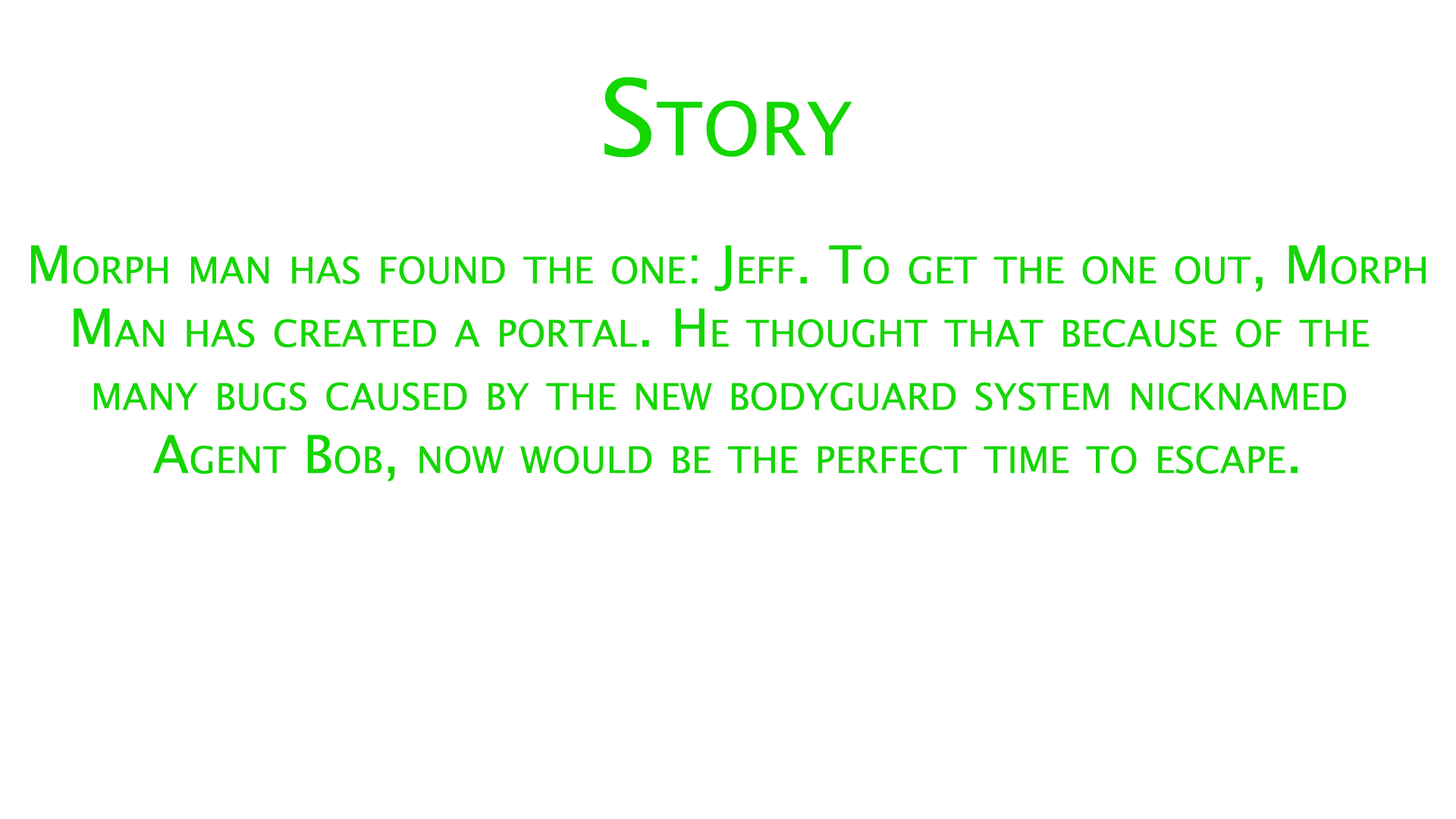
<style>
.page{position:relative;width:1456px;height:819px;background:#ffffff}
.page>*{position:absolute;margin:0}
.t1{font:105.3px "LucidaSans";color:#14d600;font-variant:small-caps}
.t2{font:52.7px "LucidaSans";color:#14d600;font-variant:small-caps}
</style>
<div class="page">
<p class="t1" style="left:604px;top:77px;width:248px;height:81px">Story</p>
<p class="t2" style="left:31px;top:245px;width:1395px;height:237px;text-align:center">Morph man has found the one: Jeff. To get the one out, Morph<br>Man has created a portal. He thought that because of the <br>many bugs caused by the new bodyguard system nicknamed <br>Agent Bob, now would be the perfect time to escape.</p>
</div>
